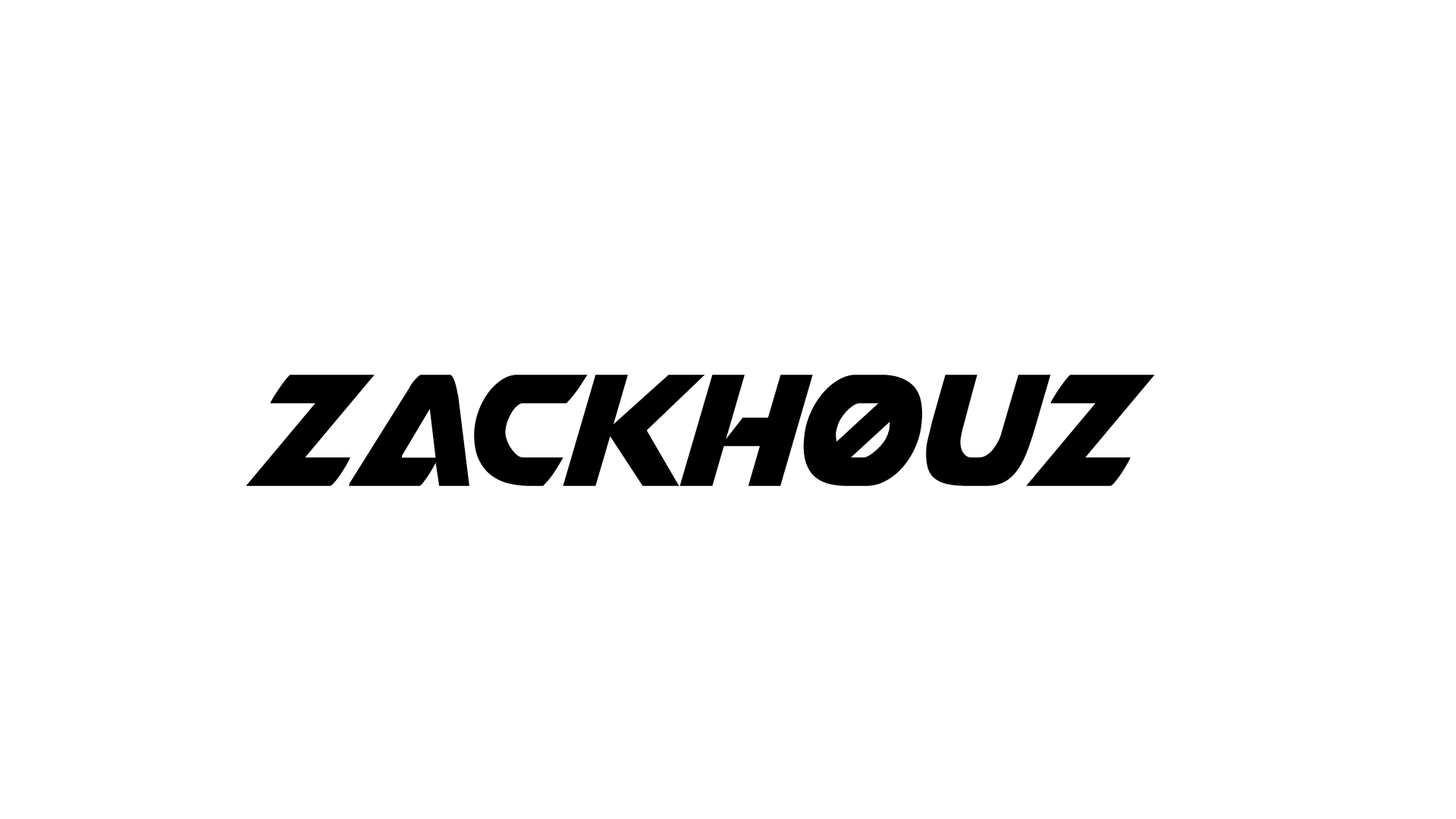
<style>
.page{position:relative;width:1456px;height:819px;background:#ffffff}
.page>*{position:absolute;margin:0}
.t1{font:209.3px "AirstrikeCondensed";color:#000000}
</style>
<div class="page">
<p class="t1" style="left:246px;top:375px;width:909px;height:111px">zackhouz</p>
</div>
